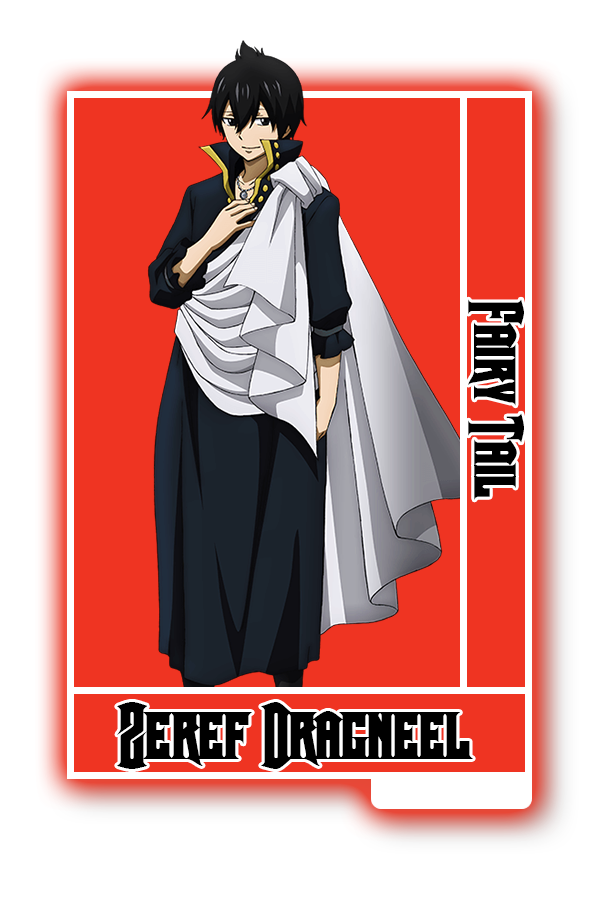
<style>
.page{position:relative;width:600px;height:900px;background:#ffffff}
.page>*{position:absolute;margin:0}
.t1{font:61.5px "Crown-Title";color:#000000}
.t2{font:70.1px "Crown-Title";color:#000000}
</style>
<div class="page">
<p class="t1" style="left:468px;top:299px;width:56px;height:201px;rotate:90deg">Fairy Tail</p>
<p class="t2" style="left:117px;top:702px;width:356px;height:67px">Zeref Dragneel</p>
</div>
